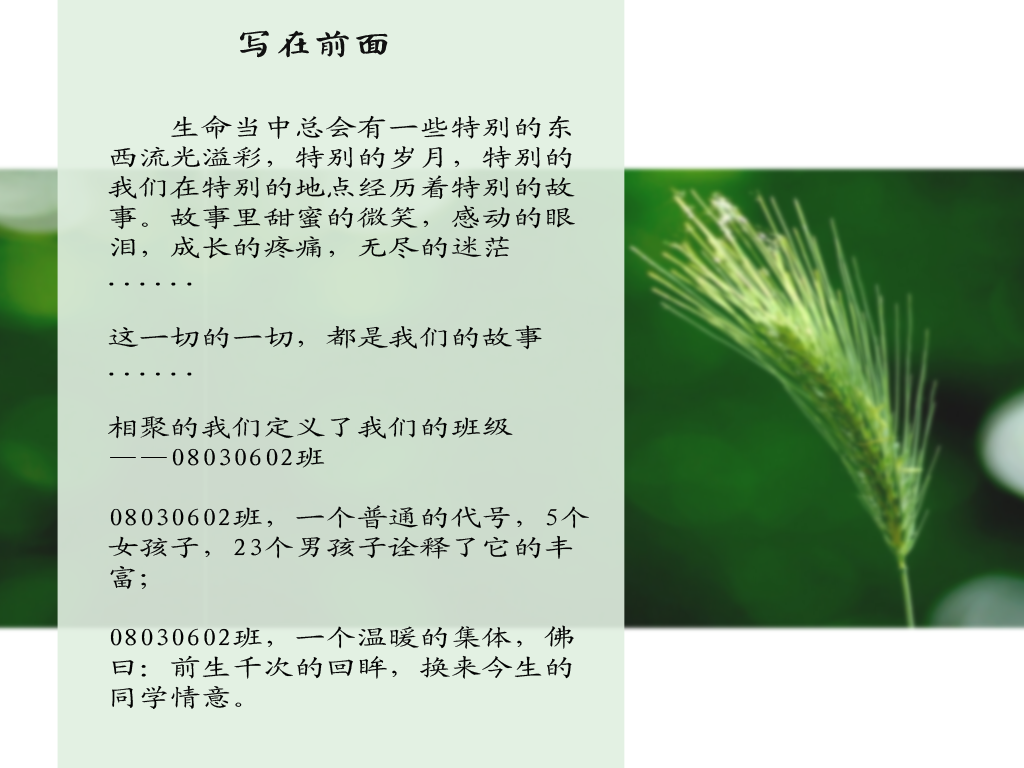
<style>
.page{position:relative;width:1024px;height:768px}
.page>*{position:absolute;margin:0}
.t1{font:30px "øów·»îów©I";color:#111111;scale:1.3 1}
.t2{font:24px/30px "KaiTi_GB2312";color:#020202;scale:1.3 1}
</style>
<div class="page">
<p class="t1" style="left:240px;top:30px;width:148px;height:28px">写在前面</p>
<p class="t2" style="left:108px;top:115px;width:481px;height:594px">生命当中总会有一些特别的东西流光溢彩，特别的岁月，特别的我们在特别的地点经历着特别的故事。故事里甜蜜的微笑，感动的眼泪，成长的疼痛，无尽的迷茫......<br><br>这一切的一切，都是我们的故事......<br><br>相聚的我们定义了我们的班级——08030602班<br><br>08030602班，一个普通的代号，5个女孩子，23个男孩子诠释了它的丰富；<br><br>08030602班，一个温暖的集体，佛曰：前生千次的回眸，换来今生的同学情意。</p>
</div>
